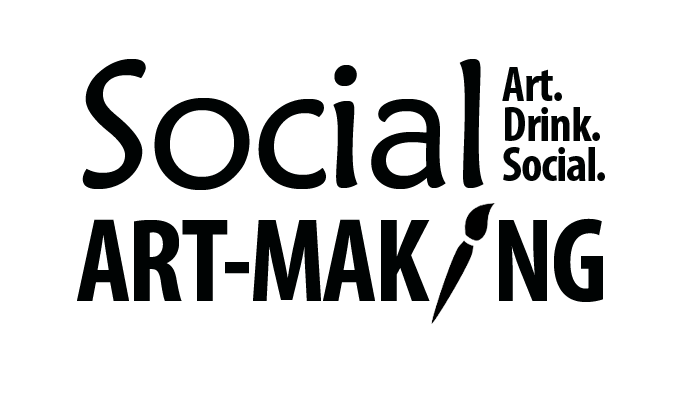
<style>
.page{position:relative;width:700px;height:400px;background:#ffffff}
.page>*{position:absolute;margin:0}
.t1{font:180px "MaiandraGD-Regular";letter-spacing:-0.025em;color:#000303}
.t2{font:50px/40px "MyriadPro-BoldCond";letter-spacing:-0.025em;color:#000303}
.t3{font:120px "MyriadPro-BoldCond";letter-spacing:-0.025em;color:#000303}
</style>
<div class="page">
<p class="t1" style="left:82px;top:59px;width:402px;height:131px">Social</p>
<p class="t2" style="left:502px;top:67px;width:103px;height:114px">Art.<br>Drink.<br>Social.</p>
<p class="t3" style="left:77px;top:219px;width:353px;height:82px">ART-MAK</p>
<p class="t3" style="left:499px;top:218px;width:104px;height:84px">NG</p>
</div>
